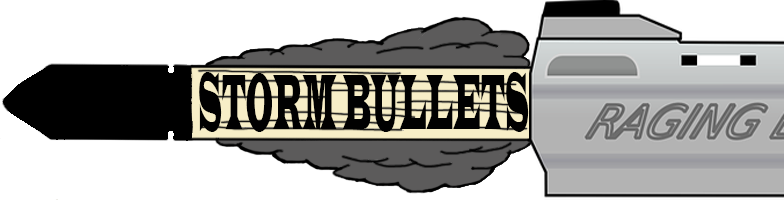
<style>
.page{position:relative;width:784px;height:203px;background:#ffffff}
.page>*{position:absolute;margin:0}
.t1{font:80.9px "LatinWide";color:#010101;scale:0.25 1}
</style>
<div class="page">
<p class="t1" style="left:199px;top:72px;width:330px;height:60px">STORM BULLETS</p>
</div>
